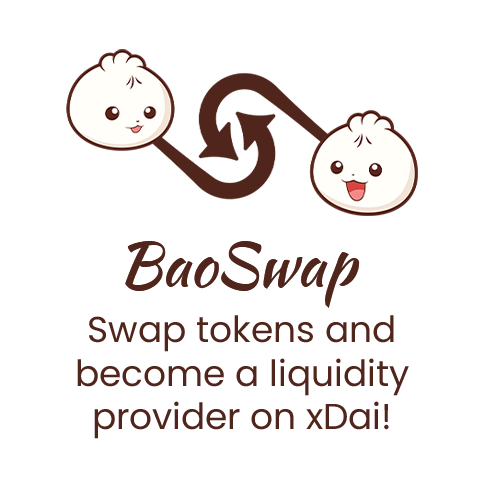
<style>
.page{position:relative;width:484px;height:484px;background:#ffffff}
.page>*{position:absolute;margin:0}
.t1{font:61.1px "KaushanScript-Regular";color:#50251c}
.t2{font:36px "Poppins-Regular";color:#50251c}
</style>
<div class="page">
<p class="t1" style="left:125px;top:241px;width:235px;height:67px">BaoSwap</p>
<p class="t2" style="left:77px;top:315px;width:332px;height:124px;text-align:center">Swap tokens and become a liquidity provider on xDai!</p>
</div>
